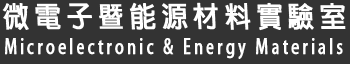
<style>
.page{position:relative;width:350px;height:64px;background:#333333}
.page>*{position:absolute;margin:0}
.t1{font:48.7px "AdobeFanHeitiStd-Bold";letter-spacing:0.2em;color:#ffffff;font-weight:bold;scale:0.91 1}
.t2{font:33.9px "AdobeFanHeitiStd-Bold";letter-spacing:0.2em;color:#ffffff;font-weight:bold;scale:0.74 1}
</style>
<div class="page">
<p class="t1" style="left:2px;top:2px;width:344px;height:29px">微電子暨能源材料實驗室</p>
<p class="t2" style="left:5px;top:38px;width:338px;height:21px">Microelectronic &amp; Energy Materials</p>
</div>
